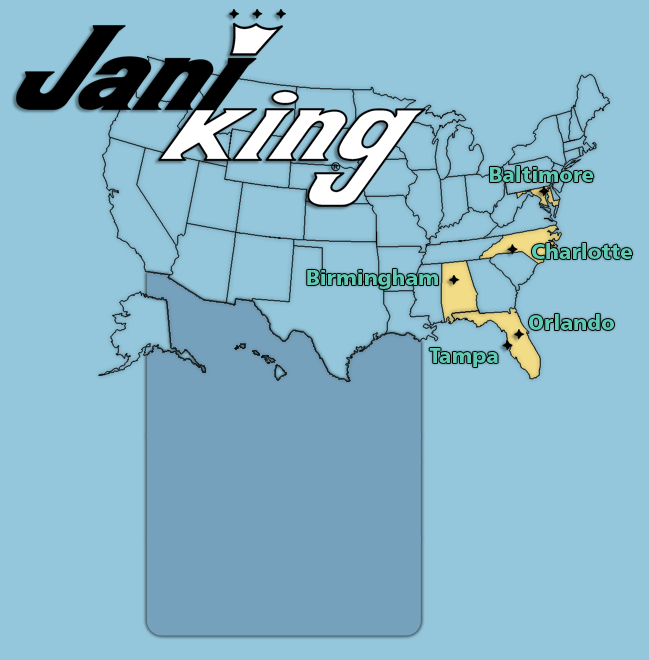
<style>
.page{position:relative;width:649px;height:660px;background:#94c7dc}
.page>*{position:absolute;margin:0}
.t1{font:20.8px "FrutigerLTStd-Black";color:#60cbb5}
</style>
<div class="page">
<p class="t1" style="left:490px;top:166px;width:104px;height:16px">Baltimore</p>
<p class="t1" style="left:532px;top:243px;width:100px;height:16px">Charlotte</p>
<p class="t1" style="left:307px;top:269px;width:131px;height:20px">Birmingham</p>
<p class="t1" style="left:529px;top:314px;width:85px;height:16px">Orlando</p>
<p class="t1" style="left:429px;top:348px;width:69px;height:19px">Tampa</p>
</div>
